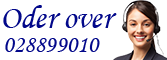
<style>
.page{position:relative;width:167px;height:60px;background:#ffffff}
.page>*{position:absolute;margin:0}
.t1{font:33px "MonotypeCorsiva";color:#02088a}
.t2{font:24px "MonotypeCorsiva";color:#02088a}
</style>
<div class="page">
<p class="t1" style="left:3px;top:5px;width:114px;height:23px">Oder over</p>
<p class="t2" style="left:5px;top:38px;width:95px;height:14px">028899010</p>
</div>
